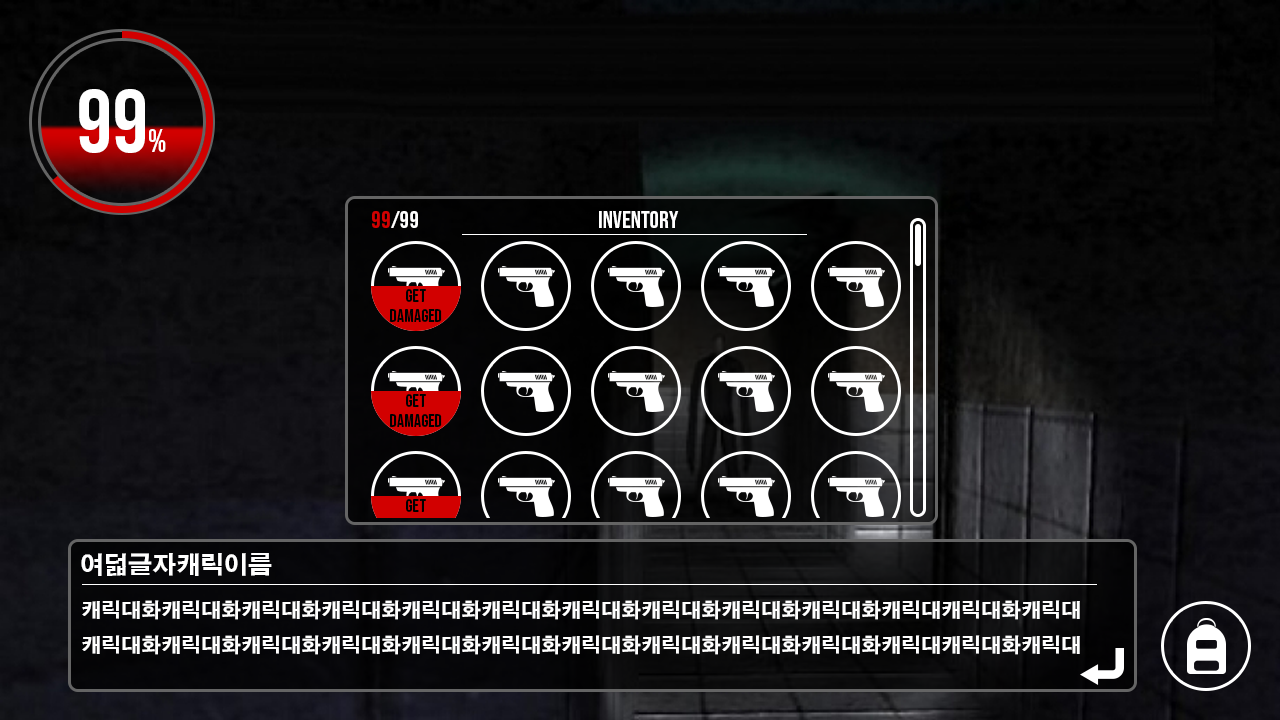
<style>
.page{position:relative;width:1280px;height:720px}
.page>*{position:absolute;margin:0}
.t1{font:89.1px "BebasNeue-Regular";color:#ffffff;text-transform:uppercase}
.t2{font:32px "BebasNeue-Regular";color:#ffffff;text-transform:uppercase}
.t3{font:24px "BebasNeue-Regular";color:#ffffff;text-transform:uppercase}
.t4{font:24px "BebasNeue-Regular";color:#d20000;text-transform:uppercase}
.t5{font:18px/20px "BebasNeue-Regular";color:#000000;text-transform:uppercase}
.t6{font:18px "BebasNeue-Regular";color:#000000;text-transform:uppercase}
.t7{font:24px "H2gtrE";color:#ffffff;text-transform:uppercase}
.t8{font:20px "H2gtrE";color:#ffffff;text-transform:uppercase}
</style>
<div class="page">
<p class="t1" style="left:79px;top:89px;width:87px;height:64px">99<span class="t2">%</span></p>
<p class="t3" style="left:372px;top:211px;width:46px;height:17px"><span class="t4">99</span>/99</p>
<p class="t3" style="left:599px;top:211px;width:80px;height:17px">Inventory</p>
<p class="t5" style="left:390px;top:289px;width:52px;height:33px;text-align:center">Get<br>damage<span class="t6">d</span></p>
<p class="t7" style="left:81px;top:553px;width:191px;height:23px">여덟글자캐릭이름</p>
<p class="t8" style="left:82px;top:600px;width:998px;height:55px">캐릭대화캐릭대화캐릭대화캐릭대화캐릭대화캐릭대화캐릭대화캐릭대화캐릭대화캐릭대화캐릭대캐릭대화캐릭대<br>캐릭대화캐릭대화캐릭대화캐릭대화캐릭대화캐릭대화캐릭대화캐릭대화캐릭대화캐릭대화캐릭대캐릭대화캐릭대</p>
</div>
